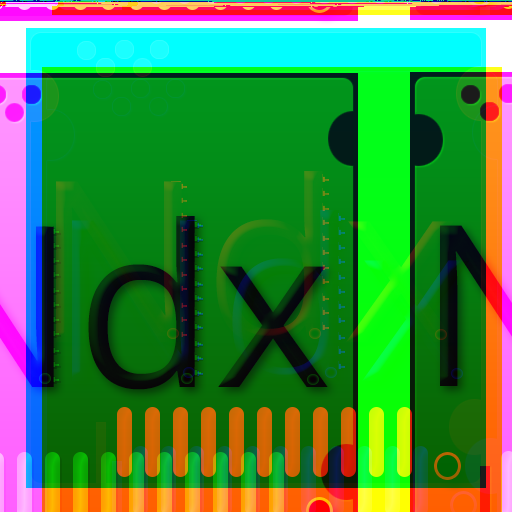
<style>
.page{position:relative;width:512px;height:512px}
.page>*{position:absolute;margin:0}
.t1{font:225px "OpenSans-Regular"}
</style>
<div class="page">
<p class="t1" style="left:56px;top:169px;width:400px;height:174px">Ndx</p>
</div>
